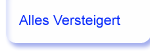
<style>
.page{position:relative;width:150px;height:54px;background:#fefefe}
.page>*{position:absolute;margin:0}
.t1{font:14px "ArialMT";color:#0326fb}
</style>
<div class="page">
<p class="t1" style="left:19px;top:15px;width:102px;height:13px">Alles Versteigert</p>
</div>
